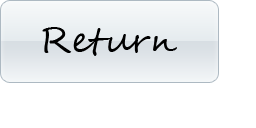
<style>
.page{position:relative;width:256px;height:128px;background:#ffffff}
.page>*{position:absolute;margin:0}
.t1{font:36px "SegoeScript";color:#000000}
</style>
<div class="page">
<p class="t1" style="left:42px;top:27px;width:135px;height:29px">Return</p>
</div>
